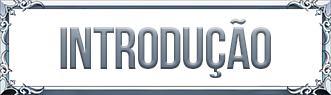
<style>
.page{position:relative;width:331px;height:95px;background:#ffffff}
.page>*{position:absolute;margin:0}
.t1{font:60px "BebasNeue";letter-spacing:-0.02em}
</style>
<div class="page">
<p class="t1" style="left:60px;top:18px;width:211px;height:60px">introdução</p>
</div>
